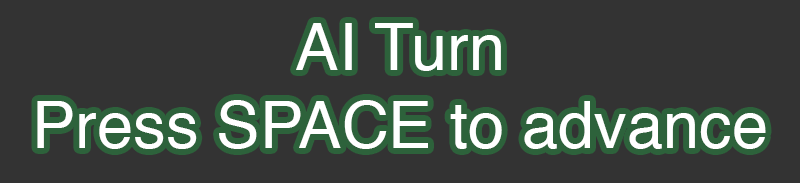
<style>
.page{position:relative;width:800px;height:183px;background:#333333}
.page>*{position:absolute;margin:0}
.t1{font:65px "Helvetica";color:#ffffff}
</style>
<div class="page">
<p class="t1" style="left:37px;top:23px;width:729px;height:126px;text-align:center">AI Turn<br>Press SPACE to advance</p>
</div>
